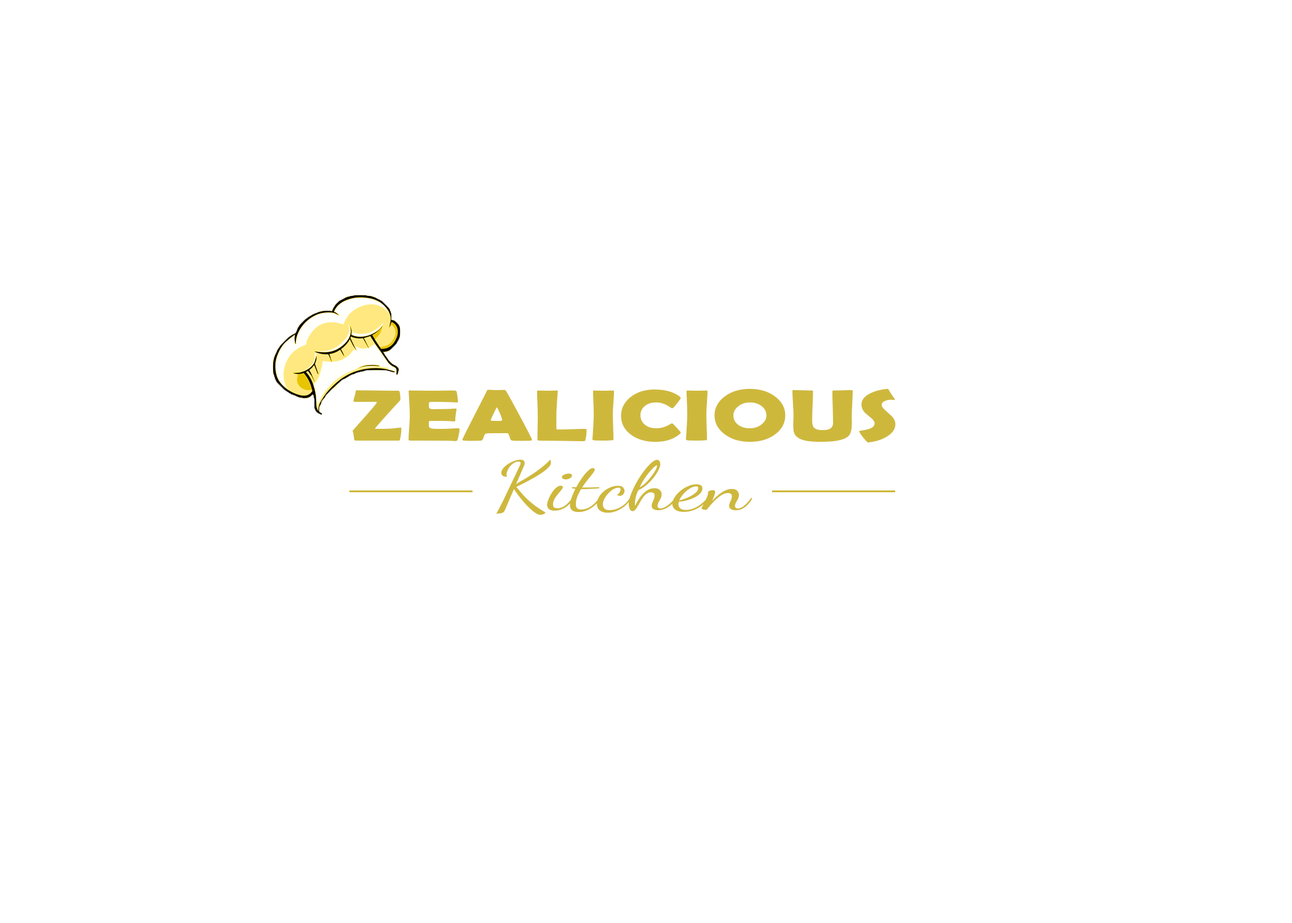
<style>
.page{position:relative;width:1292px;height:923px;background:#ffffff}
.page>*{position:absolute;margin:0}
.t1{font:104.3px "BerlinSansFBDemi-Bold";color:#ceb83c;font-variant:small-caps;scale:1.39 1}
.t2{font:68.3px "DancingScript-Regular";color:#ceb83c;scale:1.39 1}
</style>
<div class="page">
<p class="t1" style="left:353px;top:389px;width:543px;height:53px">zealicious</p>
<p class="t2" style="left:496px;top:460px;width:256px;height:55px">Kitchen</p>
</div>
